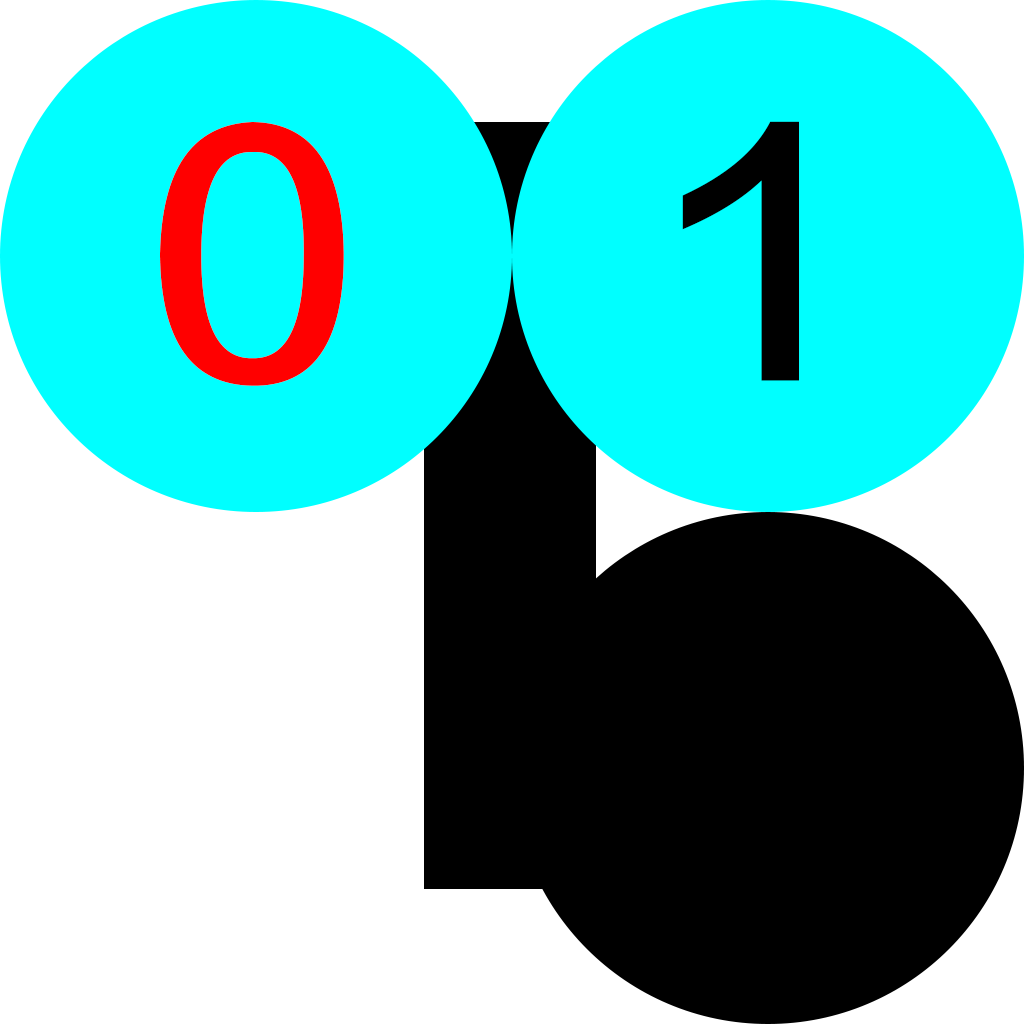
<style>
.page{position:relative;width:1024px;height:1024px;background:#00ffff}
.page>*{position:absolute;margin:0}
.t1{font:320px "FZLTZHK--GBK1-0";color:#ff0000}
.t2{font:320px "FZLTZHK--GBK1-0";color:#000000}
</style>
<div class="page">
<p class="t1" style="left:160px;top:122px;width:184px;height:264px">0</p>
<p class="t2" style="left:682px;top:121px;width:117px;height:260px">1</p>
</div>
